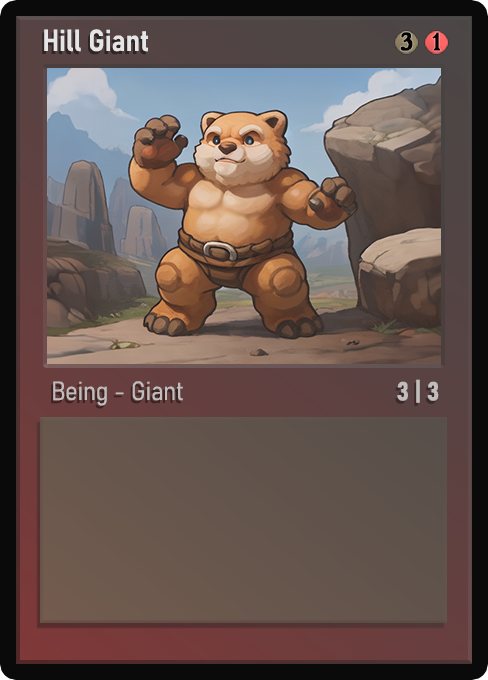
<style>
.page{position:relative;width:488px;height:680px}
.page>*{position:absolute;margin:0}
.t1{font:30px "Bahnschrift-SemiBoldSemiCondensed";color:#f2f2f2;font-weight:bold}
.t2{font:25px "WTRRoycroft";color:#000000;font-weight:bold;scale:1.09 1}
.t3{font:26px "Bahnschrift-LightSemiCondensed";color:#c8c8c8;font-weight:bold}
.t4{font:26px "Bahnschrift-BoldSemiCondensed";color:#c1bdbd;font-weight:bold}
</style>
<div class="page">
<p class="t1" style="left:44px;top:29px;width:104px;height:23px;opacity:0.9">Hill Giant</p>
<p class="t2" style="left:400px;top:32px;width:13px;height:19px">3</p>
<p class="t2" style="left:432px;top:32px;width:9px;height:19px">1</p>
<p class="t3" style="left:53px;top:381px;width:130px;height:25px;opacity:0.9">Being - Giant</p>
<p class="t4" style="left:397px;top:379px;width:42px;height:24px">3 | 3</p>
</div>
